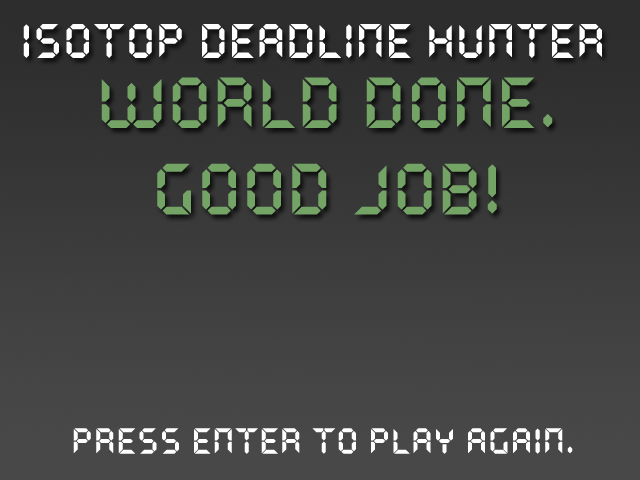
<style>
.page{position:relative;width:640px;height:480px}
.page>*{position:absolute;margin:0}
.t1{font:48px "QuartzMS";color:#ffffff}
.t2{font:72px "QuartzMS";color:#74a366}
.t3{font:36px "QuartzMS";color:#ffffff}
</style>
<div class="page">
<p class="t1" style="left:23px;top:24px;width:579px;height:34px">ISOTOP DEADLINE HUNTER</p>
<p class="t2" style="left:101px;top:77px;width:452px;height:138px;text-align:center">WORLD DONE.<br>GOOD JOB!</p>
<p class="t3" style="left:73px;top:428px;width:500px;height:26px">PRESS ENTER TO PLAY AGAIN.</p>
</div>
